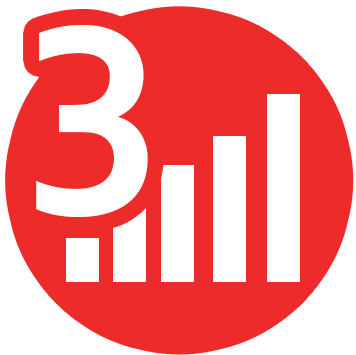
<style>
.page{position:relative;width:356px;height:355px;background:#ee2b2b}
.page>*{position:absolute;margin:0}
.t1{font:279.6px "Corbel-Bold";color:#ffffff}
</style>
<div class="page">
<p class="t1" style="left:36px;top:25px;width:112px;height:192px">3</p>
</div>
